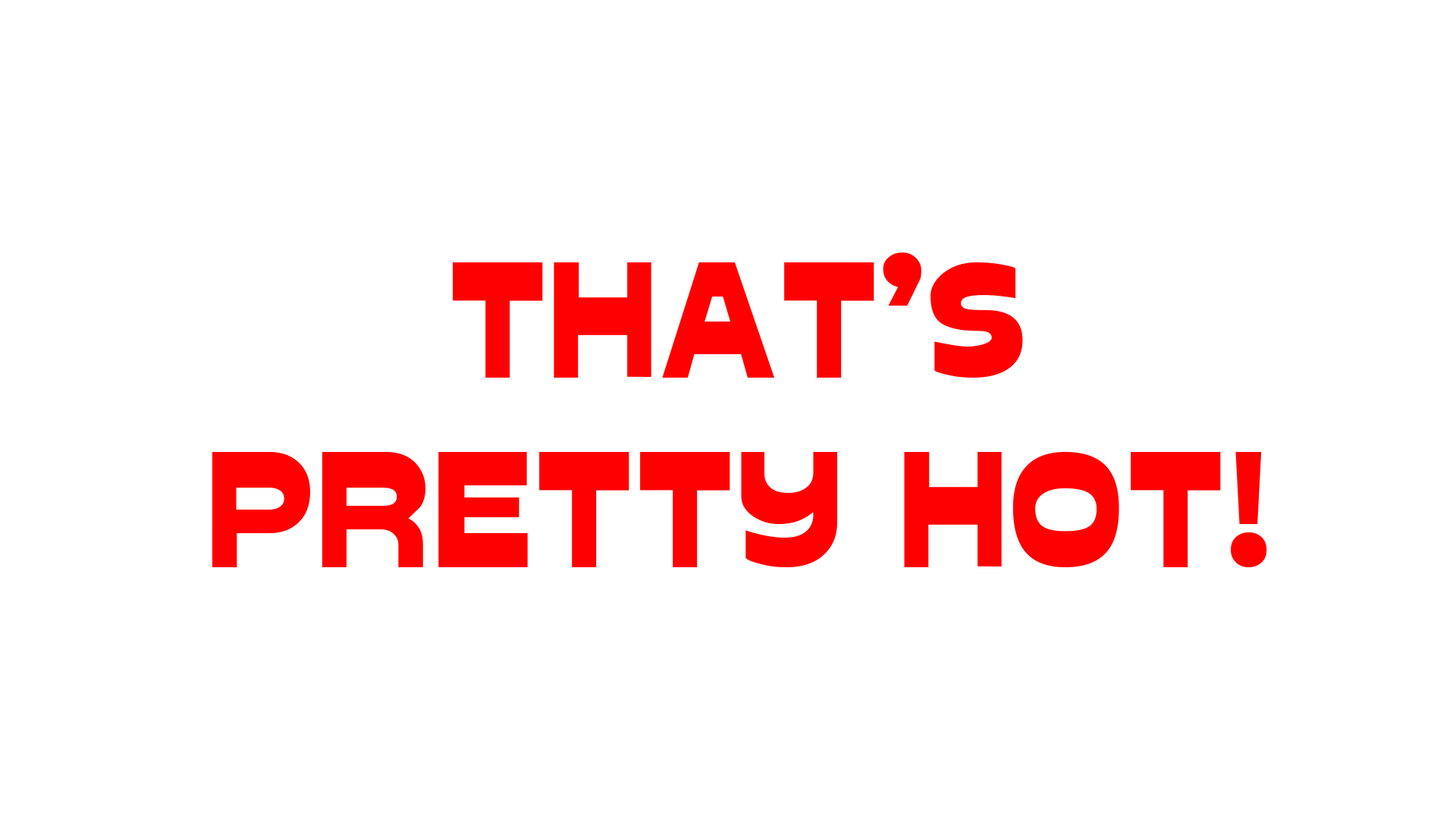
<style>
.page{position:relative;width:1456px;height:819px;background:#ffffff}
.page>*{position:absolute;margin:0}
.t1{font:158px "Glockenspiel";color:#ff0000}
</style>
<div class="page">
<p class="t1" style="left:212px;top:253px;width:1055px;height:314px;text-align:center">THAT’S<br>PRETTY HOT!</p>
</div>
